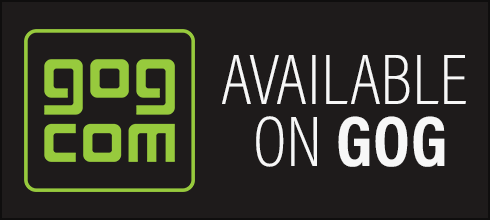
<style>
.page{position:relative;width:490px;height:220px;background:#1e1b1b}
.page>*{position:absolute;margin:0}
.t1{font:72px "AcuminConcept-CondensedExtraLight";color:#f7f7f7}
.t2{font:72px "AcuminConcept-CondensedBold";color:#f7f7f7}
</style>
<div class="page">
<p class="t1" style="left:222px;top:55px;width:244px;height:49px">AVAILABLE</p>
<p class="t2" style="left:256px;top:116px;width:189px;height:51px"><span class="t1">ON </span>GOG</p>
</div>
